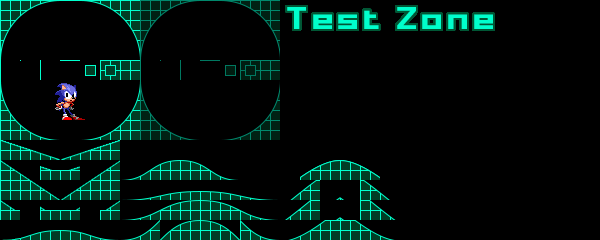
<style>
.page{position:relative;width:600px;height:240px;background:#000000}
.page>*{position:absolute;margin:0}
.t1{font:43.6px "SadanaSquare";letter-spacing:0.04em;color:#00ffcc;scale:1.29 1}
</style>
<div class="page">
<p class="t1" style="left:287px;top:7px;width:206px;height:22px">Test Zone</p>
</div>
